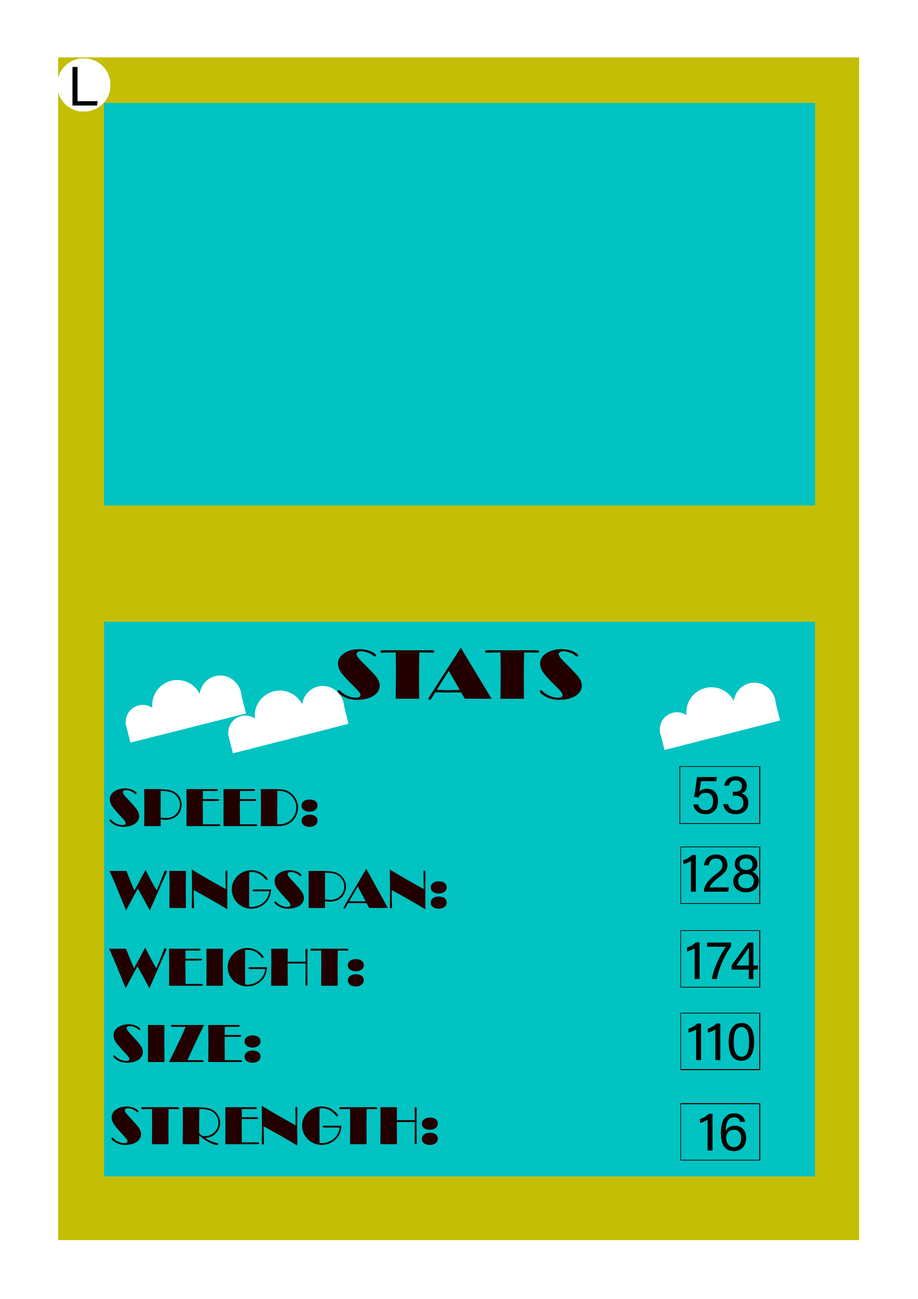
<style>
.page{position:relative;width:918px;height:1299px;background:#01c3c1}
.page>*{position:absolute;margin:0}
.t1{font:55.5px "AcuminConcept-Regular";color:#000000}
.t2{font:72.4px "Broadway";color:#230000;scale:1.09 1}
.t3{font:55.5px "Broadway";color:#230000}
</style>
<div class="page">
<p class="t1" style="left:72px;top:67px;width:26px;height:39px">L</p>
<p class="t2" style="left:338px;top:648px;width:244px;height:52px">STATS</p>
<p class="t1" style="left:693px;top:776px;width:56px;height:38px">53</p>
<p class="t3" style="left:110px;top:788px;width:208px;height:39px">SPEED:</p>
<p class="t1" style="left:683px;top:854px;width:76px;height:38px">128</p>
<p class="t3" style="left:109px;top:869px;width:338px;height:41px">WINGSPAN:</p>
<p class="t1" style="left:687px;top:942px;width:72px;height:37px">174</p>
<p class="t3" style="left:109px;top:947px;width:255px;height:41px">WEIGHT:</p>
<p class="t3" style="left:113px;top:1024px;width:148px;height:39px">SIZE:</p>
<p class="t1" style="left:689px;top:1023px;width:66px;height:38px">110</p>
<p class="t3" style="left:111px;top:1105px;width:327px;height:40px">STRENGTH:</p>
<p class="t1" style="left:700px;top:1113px;width:46px;height:38px">16</p>
</div>
